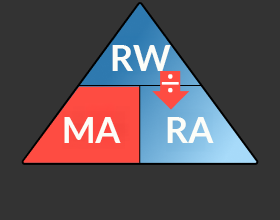
<style>
.page{position:relative;width:280px;height:220px;background:#333333}
.page>*{position:absolute;margin:0}
.t1{font:36px "Lato-Bold";color:#fcfdf8}
</style>
<div class="page">
<p class="t1" style="left:112px;top:45px;width:59px;height:26px">RW</p>
<p class="t1" style="left:64px;top:117px;width:57px;height:26px">MA</p>
<p class="t1" style="left:167px;top:117px;width:47px;height:26px">RA</p>
</div>
